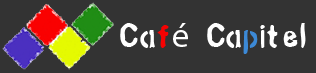
<style>
.page{position:relative;width:316px;height:73px;background:#333333}
.page>*{position:absolute;margin:0}
.t1{font:34.3px "Analog";color:#ffffff}
.t2{font:34.3px "Analog";color:#f60202}
.t3{font:34.3px "MyriadPro-Regular";color:#ffffff}
.t4{font:34.3px "Analog";color:#3c89d6}
</style>
<div class="page">
<p class="t1" style="left:120px;top:23px;width:186px;height:31px">Ca<span class="t2">f</span><span class="t3">é</span> Ca<span class="t4">p</span>itel</p>
</div>
